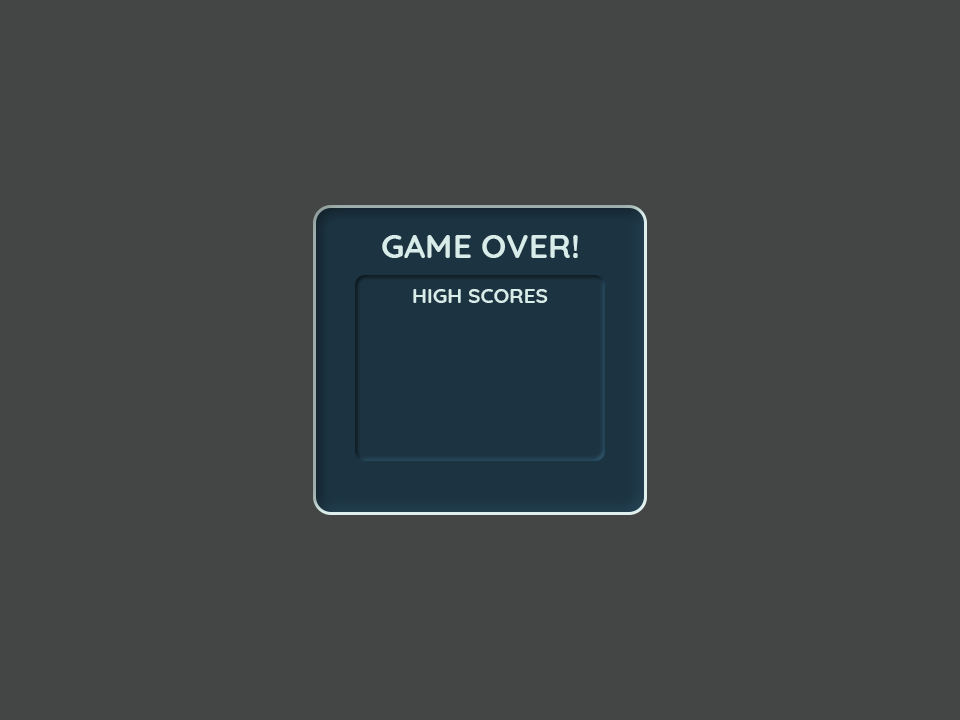
<style>
.page{position:relative;width:960px;height:720px;background:#444646}
.page>*{position:absolute;margin:0}
.t1{font:33.3px "#9Slide03QuicksandBold-Bold";color:#d8ece9;text-transform:uppercase}
.t2{font:20.8px "#9Slide03QuicksandBold-Bold";color:#d8ece9;text-transform:uppercase}
</style>
<div class="page">
<p class="t1" style="left:382px;top:235px;width:196px;height:23px">Game over!</p>
<p class="t2" style="left:413px;top:289px;width:135px;height:14px">high scores</p>
</div>
